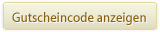
<style>
.page{position:relative;width:160px;height:32px}
.page>*{position:absolute;margin:0}
.t1{font:14px "MyriadWebPro";color:#875f0e;scale:0.9 1}
</style>
<div class="page">
<p class="t1" style="left:12px;top:12px;width:134px;height:13px">Gutscheincode anzeigen</p>
</div>
